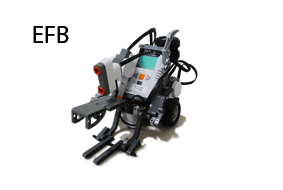
<style>
.page{position:relative;width:283px;height:190px;background:#ffffff}
.page>*{position:absolute;margin:0}
.t1{font:24.4px "MyriadPro-Regular";color:#000000}
</style>
<div class="page">
<p class="t1" style="left:33px;top:26px;width:36px;height:17px">EFB</p>
</div>
